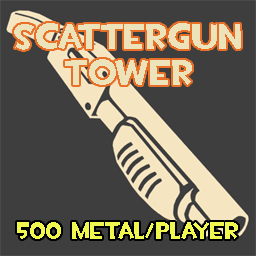
<style>
.page{position:relative;width:256px;height:256px;background:#3e3e3e}
.page>*{position:absolute;margin:0}
.t1{font:36px/36px "TF2Build";color:#ede3bb}
.t2{font:24px "TF2Build";color:#f0f850}
</style>
<div class="page">
<p class="t1" style="left:14px;top:23px;width:227px;height:62px;text-align:center">Scattergun<br>Tower</p>
<p class="t2" style="left:17px;top:222px;width:221px;height:17px">500 metal/player</p>
</div>
